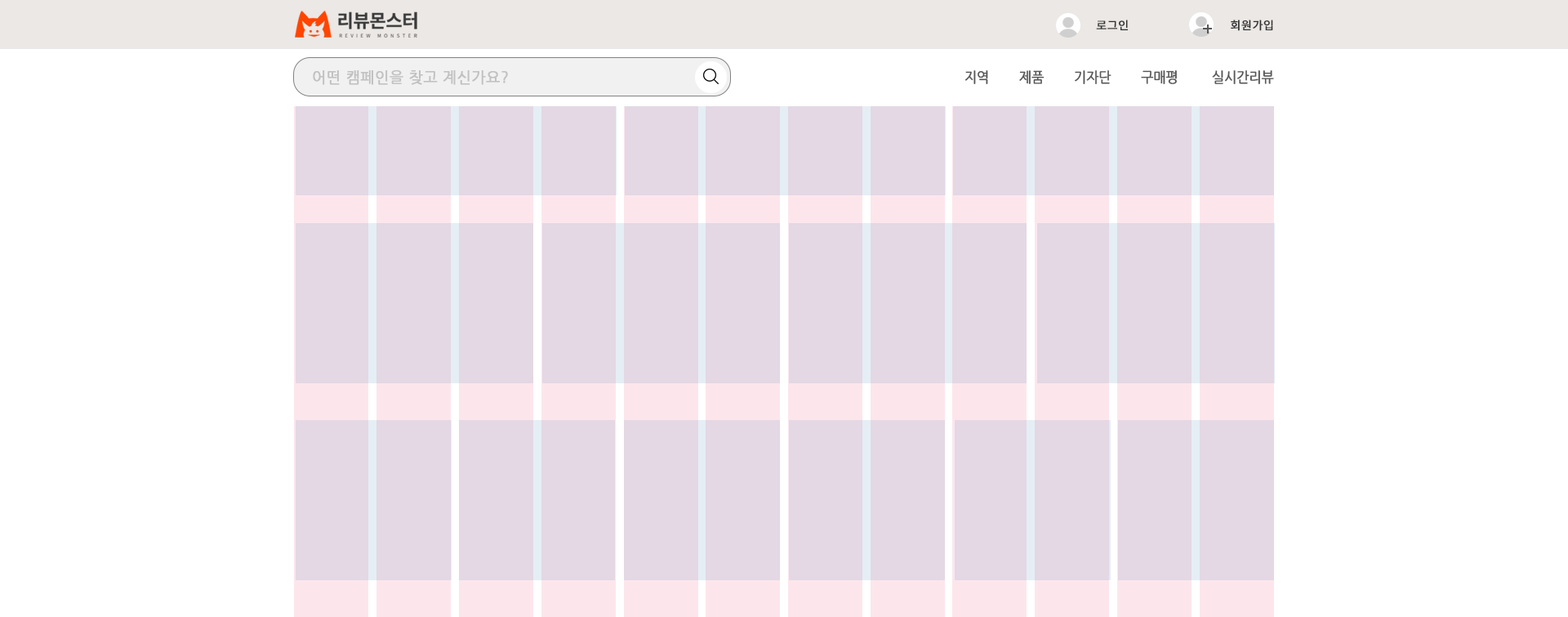
<style>
.page{position:relative;width:1568px;height:617px;background:#ffffff}
.page>*{position:absolute;margin:0}
.t1{font:11.4px "NotoSansKR-Regular";letter-spacing:0.02em;color:#333333;font-weight:bold}
.t2{font:14.7px "NanumGothic";letter-spacing:0.02em;color:#c2c1c1;font-weight:bold}
.t3{font:14.4px "NanumGothic";letter-spacing:-0.02em;color:#575757;font-weight:bold;scale:0.91 1}
</style>
<div class="page">
<p class="t1" style="left:1096px;top:20px;width:33px;height:11px">로그인</p>
<p class="t1" style="left:1231px;top:20px;width:42px;height:11px">회원가입</p>
<p class="t2" style="left:313px;top:69px;width:195px;height:16px">어떤 캠페인을 찾고 계신가요?</p>
<p class="t3" style="left:964px;top:70px;width:310px;height:14px">지역        제품        기자단        구매평         실시간리뷰</p>
</div>
